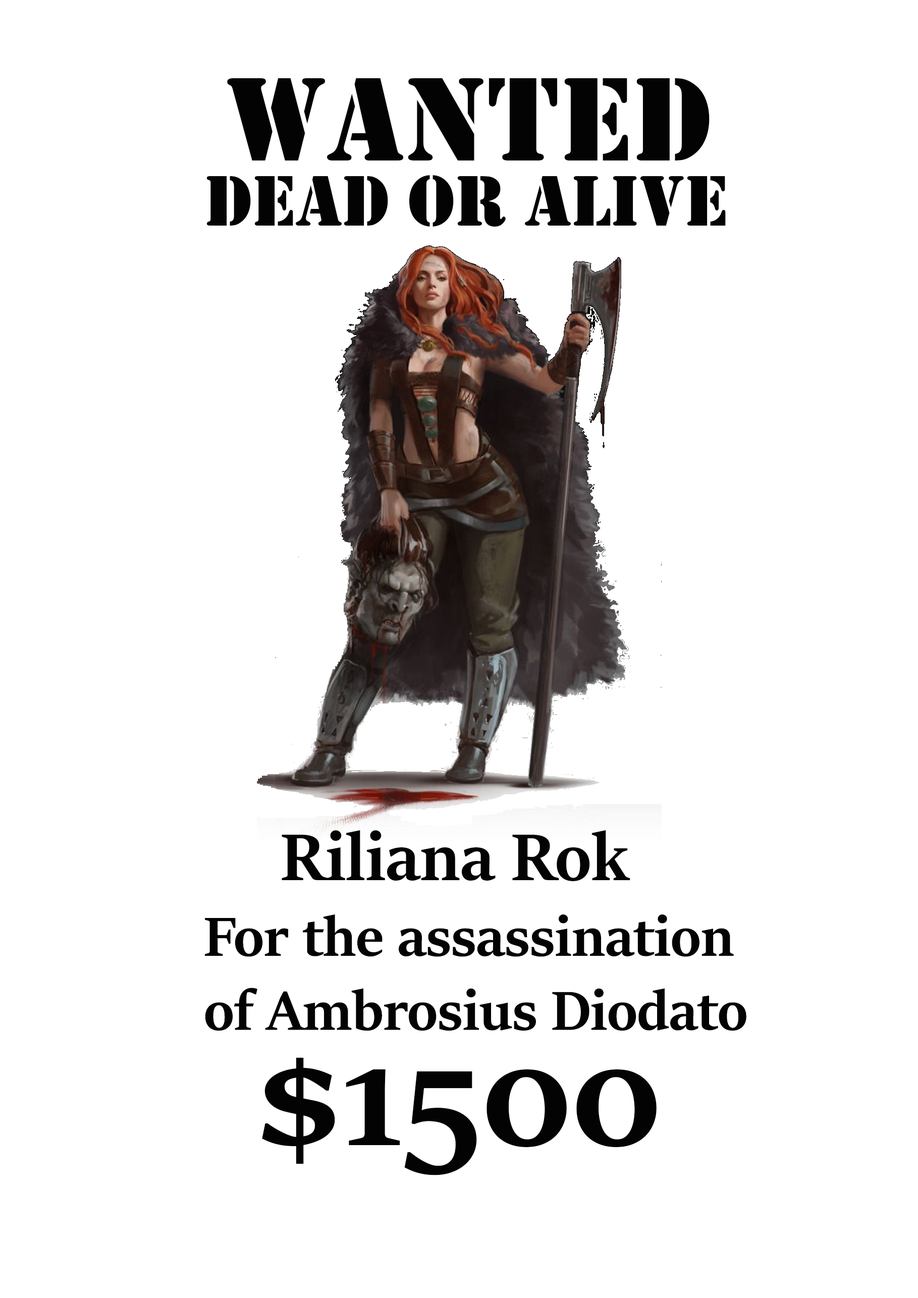
<style>
.page{position:relative;width:918px;height:1298px;background:#ffffff}
.page>*{position:absolute;margin:0}
.t1{font:123.4px "Stencil";color:#030303}
.t2{font:74px "Stencil";color:#030303}
.t3{font:74px "SitkaBanner-Bold";color:#030303}
.t4{font:61.7px "SitkaBanner-Bold";color:#030303}
.t5{font:166.6px "SitkaBanner-Bold";color:#030303}
</style>
<div class="page">
<p class="t1" style="left:227px;top:78px;width:483px;height:83px">WANTED</p>
<p class="t2" style="left:206px;top:175px;width:520px;height:52px">DEAD or alive</p>
<p class="t3" style="left:282px;top:830px;width:349px;height:51px">Riliana Rok</p>
<p class="t4" style="left:205px;top:914px;width:542px;height:117px">For the assassination<br>of Ambrosius Diodato</p>
<p class="t5" style="left:262px;top:1058px;width:395px;height:118px">$1500</p>
</div>
